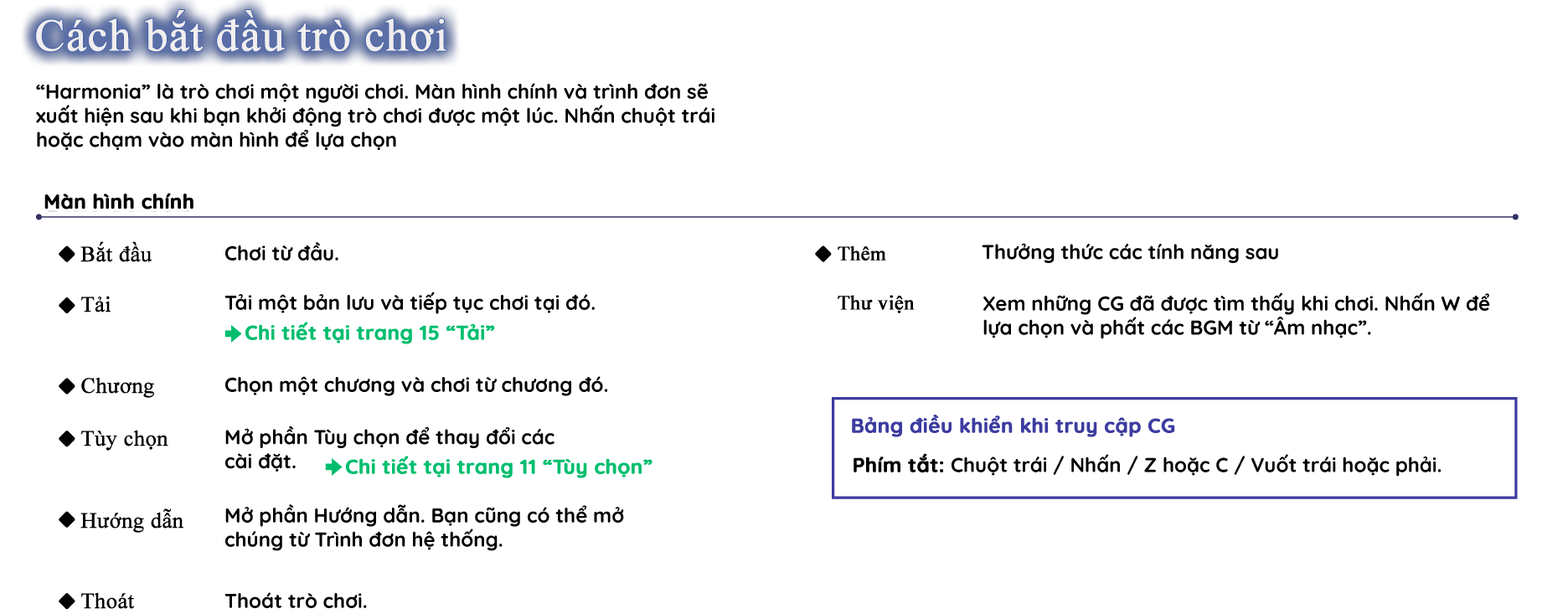
<style>
.page{position:relative;width:1568px;height:614px;background:#ffffff}
.page>*{position:absolute;margin:0}
.t1{font:45.2px "TimesNewRomanPSMT";color:#f0eeee;font-weight:bold}
.t2{font:20.1px "Quicksand-Bold";color:#000000}
.t3{font:20.1px "Quicksand-Bold";color:#000000;font-weight:bold}
.t4{font:21.8px/18.4px "TimesNewRomanPSMT";color:#000000;font-weight:bold}
.t5{font:21.8px/24.3px "TimesNewRomanPSMT";color:#000000;font-weight:bold}
.t6{font:21.8px/20.9px "TimesNewRomanPSMT";color:#000000;font-weight:bold}
.t7{font:21.8px/21.8px "TimesNewRomanPSMT";color:#000000;font-weight:bold}
.t8{font:21.8px/33.5px "TimesNewRomanPSMT";color:#000000;font-weight:bold}
.t9{font:20.1px "TimesNewRomanPSMT";color:#000000;font-weight:bold}
.t10{font:20.1px/11.7px "TimesNewRomanPSMT";color:#000000;font-weight:bold}
.t11{font:20.1px "Quicksand-Bold";color:#00be6e;font-weight:bold}
.t12{font:20.1px "Quicksand-Bold";color:#3c3ca0;font-weight:bold}
</style>
<div class="page">
<p class="t1" style="left:36px;top:10px;width:410px;height:42px">Cách bắt đầu trò chơi</p>
<p class="t1" style="left:36px;top:10px;width:410px;height:42px">Cách bắt đầu trò chơi</p>
<p class="t2" style="left:36px;top:83px;width:678px;height:67px">“Harmonia” là trò chơi một người chơi. Màn hình chính và trình đơn sẽ xuất hiện sau khi bạn khởi động trò chơi được một lúc. Nhấn chuột trái hoặc chạm vào màn hình để lựa chọn</p>
<p class="t3" style="left:44px;top:193px;width:149px;height:16px">Màn hình chính</p>
<p class="t4" style="left:80px;top:241px;width:103px;height:368px"><span class="t5">Bắt đầu<br></span><br>Tải<br><br><br>Chương<br><br>T<span class="t6">ù</span>y chọn<br><br><span class="t7"><br>H</span><span class="t6">ướ</span>ng dẫn<br><span class="t8"><br>Thoát</span></p>
<p class="t2" style="left:225px;top:242px;width:113px;height:18px">Chơi từ đầu.</p>
<p class="t9" style="left:838px;top:245px;width:77px;height:68px">Thêm<br><span class="t10"><br>Thư</span> viện</p>
<p class="t2" style="left:982px;top:243px;width:296px;height:20px">Thưởng thức các tính năng sau</p>
<p class="t2" style="left:224px;top:291px;width:371px;height:23px">Tải một bản lưu và tiếp tục chơi tại đó.</p>
<p class="t2" style="left:983px;top:292px;width:507px;height:47px">Xem những CG đã được tìm thấy khi chơi. Nhấn W để lựa chọn và phất các BGM từ “Âm nhạc”.</p>
<p class="t11" style="left:245px;top:322px;width:250px;height:22px">Chi tiết tại trang 15 “Tải”</p>
<p class="t2" style="left:225px;top:376px;width:382px;height:20px">Chọn một chương và chơi từ chương đó.</p>
<p class="t2" style="left:225px;top:426px;width:329px;height:46px">Mở phần Tùy chọn để thay đổi các <br>cài đặt.</p>
<p class="t12" style="left:852px;top:415px;width:323px;height:22px">Bảng điều khiển khi truy cập CG</p>
<p class="t11" style="left:346px;top:456px;width:306px;height:22px">Chi tiết tại trang 11 “Tùy chọn”</p>
<p class="t2" style="left:854px;top:453px;width:587px;height:24px"><span class="t3">Phím tắt: </span>Chuột trái / Nhấn / Z hoặc C / Vuốt trái hoặc phải.</p>
<p class="t2" style="left:225px;top:504px;width:399px;height:47px">Mở phần Hướng dẫn. Bạn cũng có thể mở chúng từ Trình đơn hệ thống.</p>
<p class="t2" style="left:224px;top:592px;width:143px;height:16px">Thoát trò chơi.</p>
</div>
